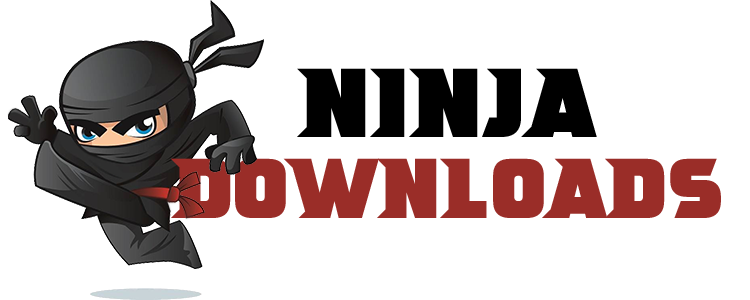
<style>
.page{position:relative;width:750px;height:300px;background:#ffffff}
.page>*{position:absolute;margin:0}
.t1{font:100px "NinjaAttack";color:#000000}
.t2{font:86.6px "NinjaAttack";color:#9a2d28}
</style>
<div class="page">
<p class="t1" style="left:297px;top:68px;width:300px;height:69px">Ninja</p>
<p class="t2" style="left:171px;top:158px;width:550px;height:60px">downloads</p>
</div>
